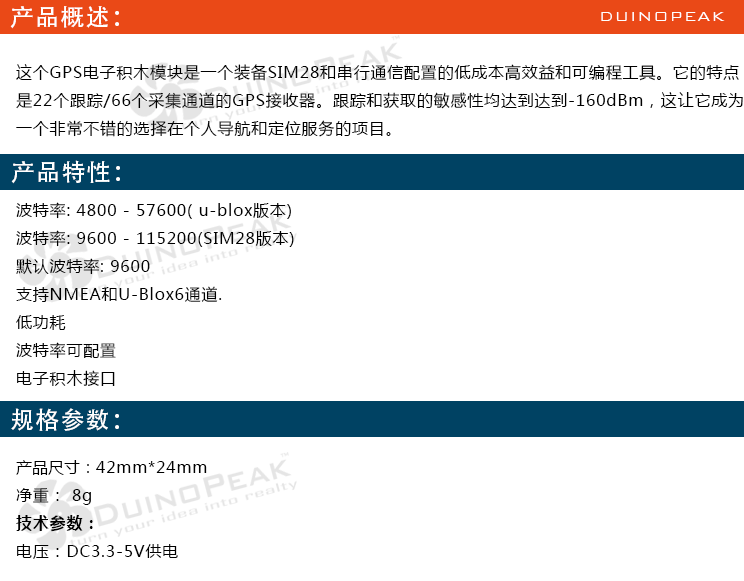
<style>
.page{position:relative;width:744px;height:581px;background:#ffffff}
.page>*{position:absolute;margin:0}
.t1{font:24px "AdobeHeitiStd-Regular";letter-spacing:0.05em;color:#ffffff}
.t2{font:18px "BankGothicBT-Light";letter-spacing:0.05em;color:#ffffff}
.t3{font:16px "MicrosoftYaHei";letter-spacing:0.05em;color:#000000}
.t4{font:16px "MicrosoftYaHei";color:#000000}
.t5{font:16px "MicrosoftYaHei-Bold";letter-spacing:0.05em;color:#000000}
</style>
<div class="page">
<p class="t1" style="left:10px;top:6px;width:109px;height:23px">产品概述：</p>
<p class="t2" style="left:601px;top:12px;width:124px;height:9px">DUINOPEAK</p>
<p class="t3" style="left:16px;top:64px;width:727px;height:73px">这个GPS电子积木模块是一个装备SIM28和串行通信配置的低成本高效益和可编程工具。它的特点<br>是22个跟踪/66个采集通道的GPS接收器。跟踪和获取的敏感性均达到达到-160dBm，这让它成为<br>一个非常不错的选择在个人导航和定位服务的项目。</p>
<p class="t1" style="left:11px;top:160px;width:109px;height:24px">产品特性：</p>
<p class="t3" style="left:16px;top:202px;width:278px;height:184px">波特率: 4800 - 57600( u-blox版本)<br>波特率: 9600 - 115200(SIM28版本)<br>默认波特率: 9600<br>支持NMEA和U-Blox6通道.<br>低功耗<br>波特率可配置<br>电子积木接口</p>
<p class="t1" style="left:11px;top:408px;width:108px;height:23px">规格参数：</p>
<p class="t3" style="left:16px;top:460px;width:191px;height:99px"><span class="t4">产品尺寸：</span>42mm*24mm<br>净重： 8g<br><span class="t5">技术参数：<br></span>电压：DC3.3-5V供电</p>
</div>
